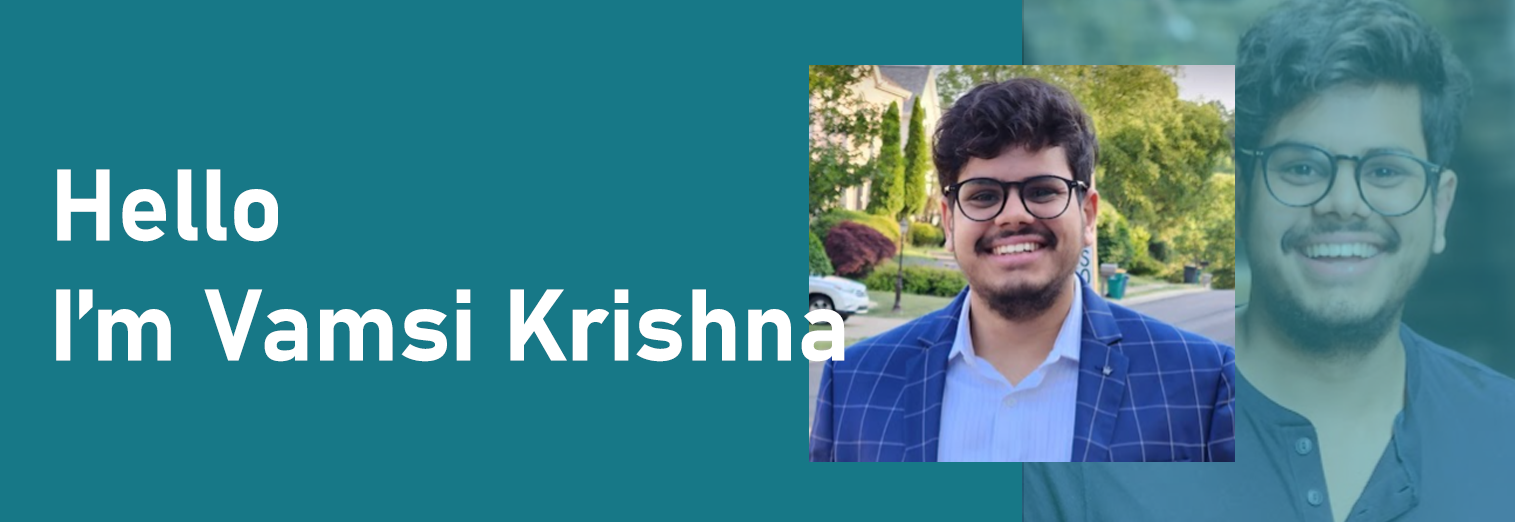
<style>
.page{position:relative;width:1515px;height:522px;background:#177887}
.page>*{position:absolute;margin:0}
.t1{font:100px "Bahnschrift-Bold";color:#ffffff}
</style>
<div class="page">
<p class="t1" style="left:56px;top:169px;width:789px;height:193px">Hello<br>I’m Vamsi Krishna</p>
</div>
